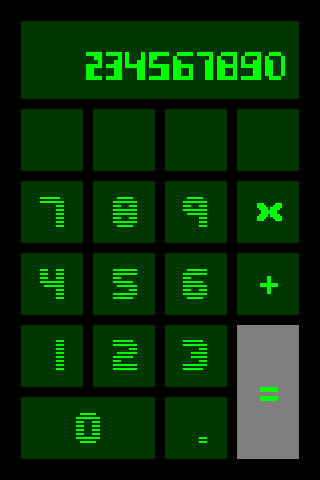
<style>
.page{position:relative;width:320px;height:480px;background:#003600}
.page>*{position:absolute;margin:0}
.t1{font:32px "Commo-Regular";color:#00ff00}
.t2{font:44px "EditUndoLineBRK";color:#00ff00}
.t3{font:18px "M42_FLIGHT-721";color:#00ff00}
</style>
<div class="page">
<p class="t1" style="left:86px;top:52px;width:199px;height:28px">234567890</p>
<p class="t2" style="left:40px;top:197px;width:24px;height:30px">7</p>
<p class="t2" style="left:113px;top:197px;width:24px;height:30px">8</p>
<p class="t2" style="left:183px;top:197px;width:24px;height:30px">9</p>
<p class="t3" style="left:257px;top:203px;width:25px;height:18px">x</p>
<p class="t2" style="left:40px;top:269px;width:24px;height:30px">4</p>
<p class="t2" style="left:113px;top:269px;width:24px;height:30px">5</p>
<p class="t2" style="left:183px;top:269px;width:24px;height:30px">6</p>
<p class="t3" style="left:260px;top:276px;width:18px;height:18px">+</p>
<p class="t2" style="left:56px;top:340px;width:8px;height:30px">1</p>
<p class="t2" style="left:113px;top:340px;width:24px;height:30px">2</p>
<p class="t2" style="left:183px;top:340px;width:24px;height:30px">3</p>
<p class="t3" style="left:260px;top:387px;width:18px;height:14px">=</p>
<p class="t2" style="left:76px;top:413px;width:24px;height:30px">0</p>
<p class="t2" style="left:199px;top:437px;width:8px;height:6px">.</p>
</div>
